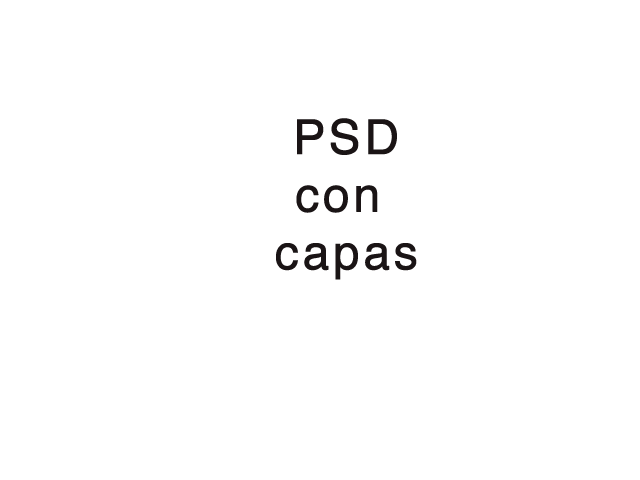
<style>
.page{position:relative;width:640px;height:480px;background:#ffffff}
.page>*{position:absolute;margin:0}
.t1{font:48px "Helvetica";letter-spacing:0.05em;color:#1a1415;font-weight:bold}
</style>
<div class="page">
<p class="t1" style="left:276px;top:118px;width:141px;height:162px;text-align:center">PSD<br>con <br>capas</p>
</div>
